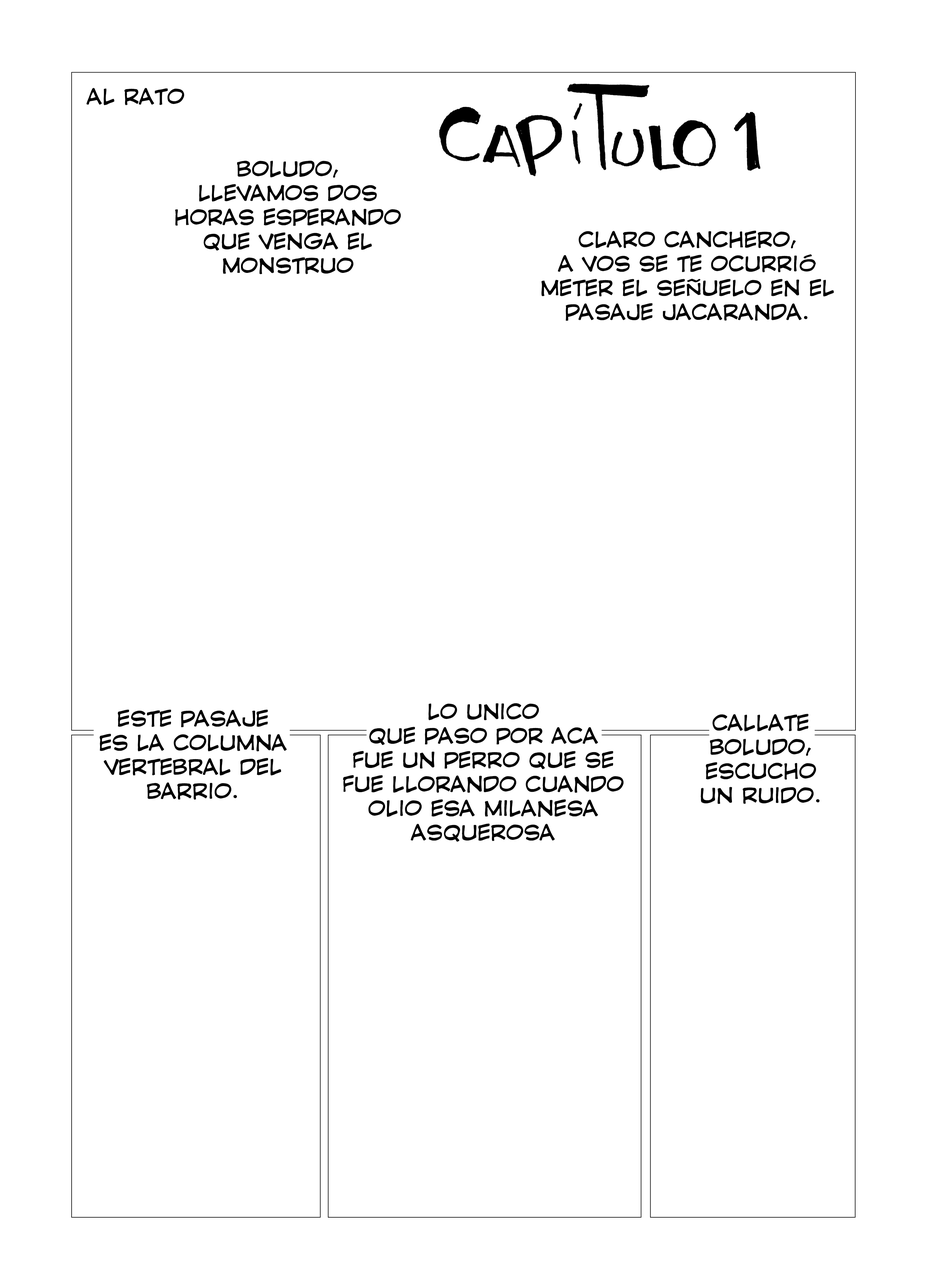
<style>
.page{position:relative;width:928px;height:1285px;background:#ffffff}
.page>*{position:absolute;margin:0}
.t1{font:20.1px "CCComicrazy-Roman";color:#000000}
</style>
<div class="page">
<p class="t1" style="left:86px;top:88px;width:98px;height:17px">AL RATO</p>
<p class="t1" style="left:175px;top:160px;width:226px;height:114px;text-align:center">BOLUDO, <br>LLEVAMOS DOS HORAS ESPERANDO QUE VENGA EL MONSTRUO</p>
<p class="t1" style="left:541px;top:231px;width:293px;height:90px;text-align:center">CLARO CANCHERO, <br>A VOS SE TE OCURRIÓ METER EL SEÑUELO EN EL PASAJE JACARANDA.</p>
<p class="t1" style="left:99px;top:710px;width:188px;height:90px;text-align:center">ESTE PASAJE <br>ES LA COLUMNA VERTEBRAL DEL BARRIO.</p>
<p class="t1" style="left:343px;top:703px;width:281px;height:139px;text-align:center">LO UNICO <br>QUE PASO POR ACA <br>FUE UN PERRO QUE SE FUE LLORANDO CUANDO OLIO ESA MILANESA <br>ASQUEROSA</p>
<p class="t1" style="left:701px;top:714px;width:119px;height:90px;text-align:center">CALLATE BOLUDO, ESCUCHO UN RUIDO.</p>
</div>
